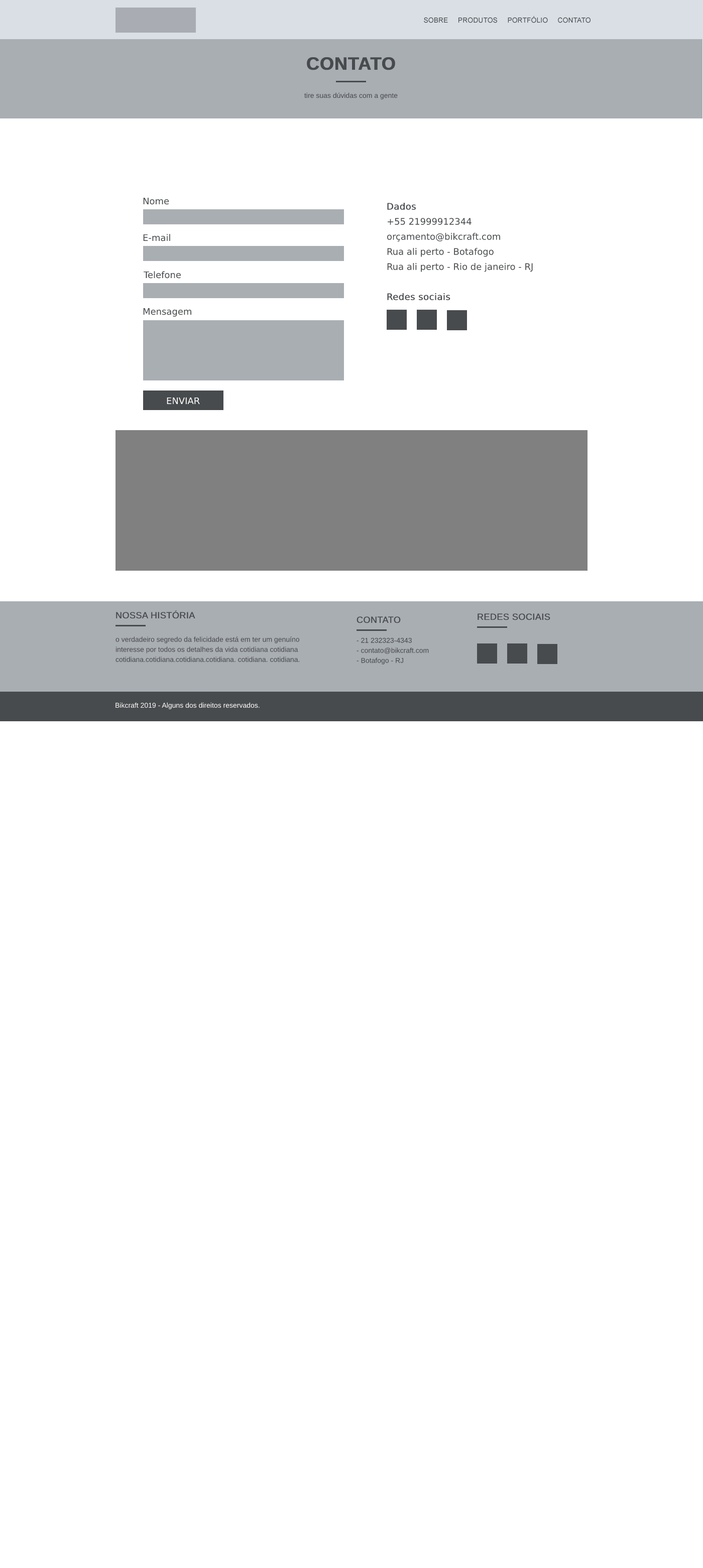
<style>
.page{position:relative;width:703px;height:1568px;background:#ffffff}
.page>*{position:absolute;margin:0}
.t1{font:7px "ArialMT";color:#484b4d;text-transform:uppercase}
.t2{font:18.1px "Arial-BoldMT";color:#484b4d;text-transform:uppercase;font-weight:bold}
.t3{font:7px "ArialMT";color:#484b4d}
.t4{font:9px "DejaVuSans";color:#484b4d}
.t5{font:9px/15.1px "DejaVuSans";color:#484b4d}
.t6{font:9px/15.1px "DejaVuSans";color:#484b4d;font-weight:bold}
.t7{font:9px "DejaVuSans";color:#ffffff;text-transform:uppercase}
.t8{font:9px "ArialMT";color:#484b4d;font-weight:bold}
.t9{font:7px/10px "ArialMT";color:#484b4d}
.t10{font:7px "ArialMT";color:#ffffff}
</style>
<div class="page">
<p class="t1" style="left:424px;top:16px;width:166px;height:7px">Sobre     Produtos     PORTFÓLIO     Contato</p>
<p class="t2" style="left:307px;top:57px;width:88px;height:13px">Contato</p>
<p class="t3" style="left:304px;top:92px;width:94px;height:7px">tire suas dúvidas com a gente</p>
<p class="t4" style="left:143px;top:197px;width:26px;height:8px">Nome</p>
<p class="t5" style="left:386px;top:203px;width:147px;height:97px"><span class="t6">Dados<br></span>+55 21999912344<br>orçamento@bikcraft.com<br>Rua ali perto - Botafogo<br>Rua ali perto - Rio de janeiro - RJ<br><br><span class="t6">Redes sociais</span></p>
<p class="t4" style="left:143px;top:234px;width:27px;height:7px">E-mail</p>
<p class="t4" style="left:143px;top:271px;width:38px;height:8px">Telefone</p>
<p class="t4" style="left:143px;top:308px;width:48px;height:9px">Mensagem</p>
<p class="t7" style="left:167px;top:397px;width:33px;height:7px">Enviar</p>
<p class="t8" style="left:116px;top:610px;width:79px;height:9px">NOSSA HISTÓRIA</p>
<p class="t8" style="left:356px;top:616px;width:45px;height:7px">CONTATO</p>
<p class="t8" style="left:477px;top:613px;width:73px;height:7px">REDES SOCIAIS</p>
<p class="t9" style="left:115px;top:636px;width:185px;height:26px">o verdadeiro segredo da felicidade está em ter um genuíno interesse por todos os detalhes da vida cotidiana cotidiana  cotidiana.cotidiana.cotidiana.cotidiana. cotidiana. cotidiana.</p>
<p class="t9" style="left:356px;top:637px;width:73px;height:28px">- 21 232323-4343<br>- contato@bikcraft.com<br>- Botafogo - RJ</p>
<p class="t10" style="left:115px;top:702px;width:144px;height:7px">Bikcraft 2019 - Alguns dos direitos reservados.</p>
</div>
